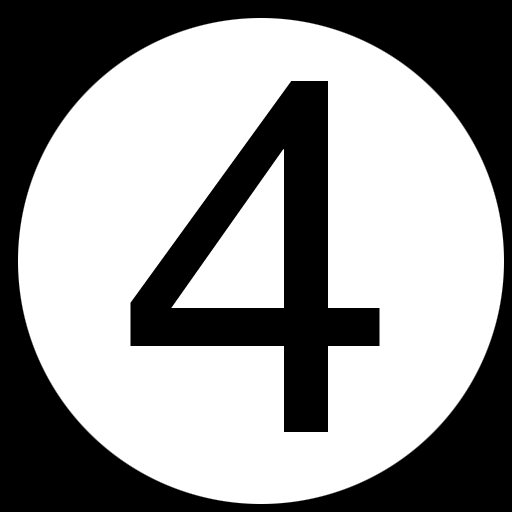
<style>
.page{position:relative;width:512px;height:512px;background:#ffffff}
.page>*{position:absolute;margin:0}
.t1{font:500px "Helvetica";color:#000000}
</style>
<div class="page">
<p class="t1" style="left:130px;top:81px;width:250px;height:351px">4</p>
</div>
